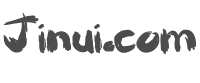
<style>
.page{position:relative;width:200px;height:83px;background:#ffffff}
.page>*{position:absolute;margin:0}
.t1{font:64px "HairBrushThick";color:#4c4c4c}
</style>
<div class="page">
<p class="t1" style="left:3px;top:12px;width:193px;height:43px">Jinui.com</p>
</div>
